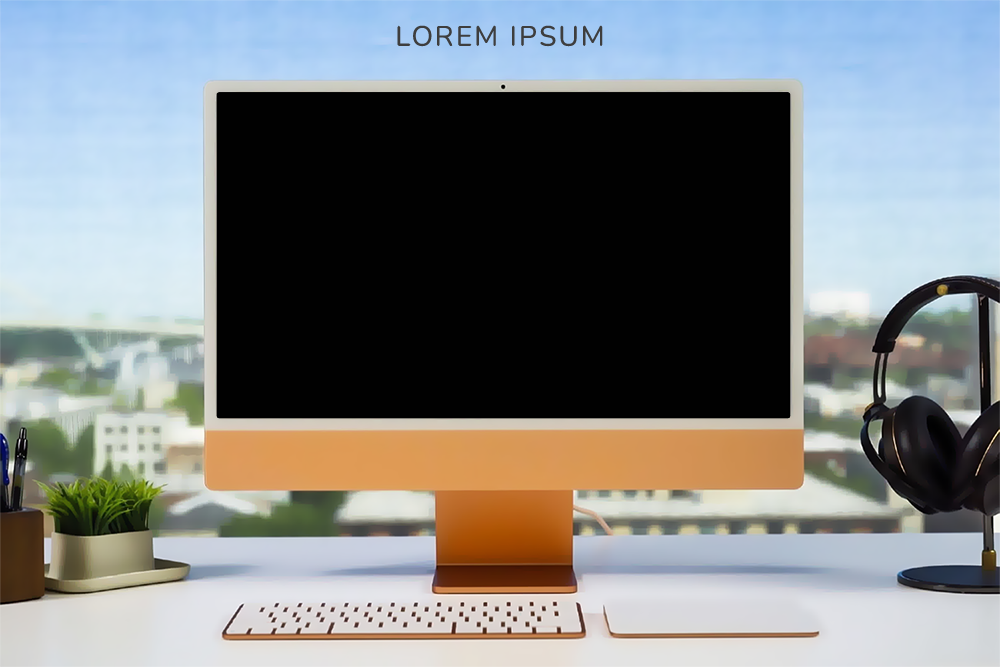
<style>
.page{position:relative;width:1000px;height:667px;background:#010101}
.page>*{position:absolute;margin:0}
.t1{font:28px "Nunito-Regular";letter-spacing:0.08em;color:#3e3e3e;text-transform:uppercase}
</style>
<div class="page">
<p class="t1" style="left:397px;top:25px;width:206px;height:22px">Lorem Ipsum</p>
</div>
